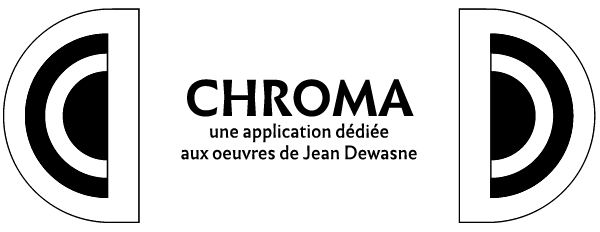
<style>
.page{position:relative;width:600px;height:232px;background:#ffffff}
.page>*{position:absolute;margin:0}
.t1{font:18px "Infini-Regular";color:#000000}
.t2{font:48px "Infini-Bold";color:#000000}
</style>
<div class="page">
<p class="t1" style="left:181px;top:79px;width:236px;height:81px;text-align:center"><span class="t2">CHROMA<br></span>une application dédiée <br>aux oeuvres de Jean Dewasne</p>
</div>
